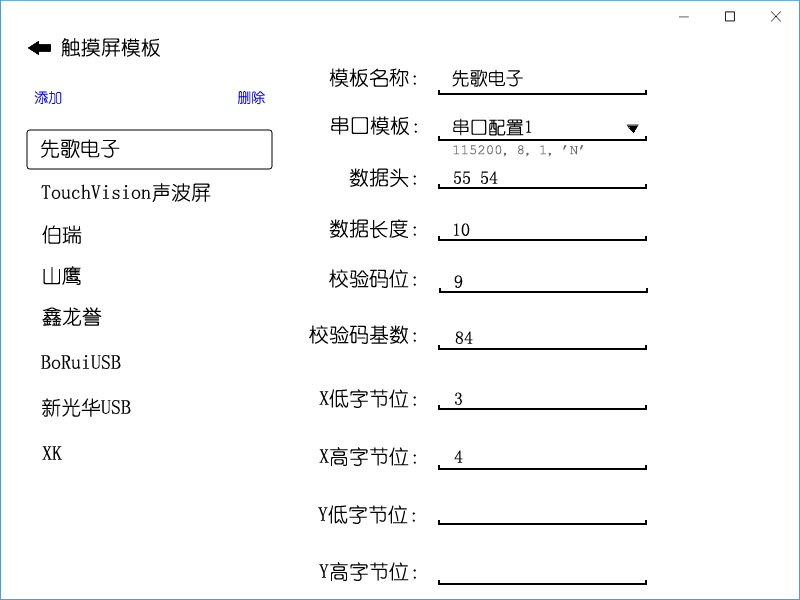
<style>
.page{position:relative;width:800px;height:600px;background:#ffffff}
.page>*{position:absolute;margin:0}
.t1{font:20px "YouYuan";color:#010101}
.t2{font:18px "YouYuan";color:#010101}
.t3{font:14px "YouYuan";color:#0000fe}
.t4{font:14px "CourierNewPSMT";color:#696666}
.t5{font:14px "YouYuan";color:#696666}
.t6{font:18px "YouYuan";color:#101010}
</style>
<div class="page">
<p class="t1" style="left:61px;top:38px;width:99px;height:19px">触摸屏模板</p>
<p class="t1" style="left:329px;top:68px;width:87px;height:19px">模板名称：</p>
<p class="t2" style="left:452px;top:69px;width:71px;height:18px">先歌电子</p>
<p class="t3" style="left:34px;top:91px;width:28px;height:13px">添加</p>
<p class="t3" style="left:238px;top:91px;width:27px;height:14px">删除</p>
<p class="t1" style="left:331px;top:116px;width:86px;height:19px">串口模板：</p>
<p class="t2" style="left:453px;top:118px;width:79px;height:18px">串口配置1</p>
<p class="t1" style="left:41px;top:139px;width:79px;height:19px">先歌电子</p>
<p class="t4" style="left:453px;top:145px;width:131px;height:12px">115200<span class="t5">，</span>8<span class="t5">，</span>1<span class="t5">，</span>’N’</p>
<p class="t1" style="left:349px;top:168px;width:67px;height:19px">数据头：</p>
<p class="t2" style="left:454px;top:171px;width:44px;height:13px">55 54</p>
<p class="t1" style="left:41px;top:183px;width:170px;height:19px">TouchVision声波屏</p>
<p class="t1" style="left:329px;top:219px;width:87px;height:20px">数据长度：</p>
<p class="t1" style="left:42px;top:225px;width:40px;height:19px">伯瑞</p>
<p class="t2" style="left:454px;top:223px;width:16px;height:13px">10</p>
<p class="t1" style="left:43px;top:266px;width:38px;height:19px">山鹰</p>
<p class="t1" style="left:329px;top:269px;width:87px;height:19px">校验码位：</p>
<p class="t2" style="left:454px;top:275px;width:9px;height:13px">9</p>
<p class="t1" style="left:42px;top:307px;width:60px;height:19px">鑫龙誉</p>
<p class="t1" style="left:309px;top:325px;width:107px;height:19px">校验码基数：</p>
<p class="t2" style="left:455px;top:331px;width:18px;height:13px">84</p>
<p class="t1" style="left:41px;top:355px;width:80px;height:14px">BoRuiUSB</p>
<p class="t1" style="left:319px;top:389px;width:97px;height:19px">X低字节位：</p>
<p class="t1" style="left:42px;top:398px;width:89px;height:19px">新光华USB</p>
<p class="t2" style="left:455px;top:392px;width:7px;height:13px">3</p>
<p class="t1" style="left:42px;top:446px;width:20px;height:14px">XK</p>
<p class="t1" style="left:319px;top:447px;width:97px;height:19px">X高字节位：</p>
<p class="t6" style="left:454px;top:450px;width:9px;height:13px">4</p>
<p class="t1" style="left:318px;top:505px;width:97px;height:19px">Y低字节位：</p>
<p class="t1" style="left:319px;top:562px;width:97px;height:19px">Y高字节位：</p>
</div>
